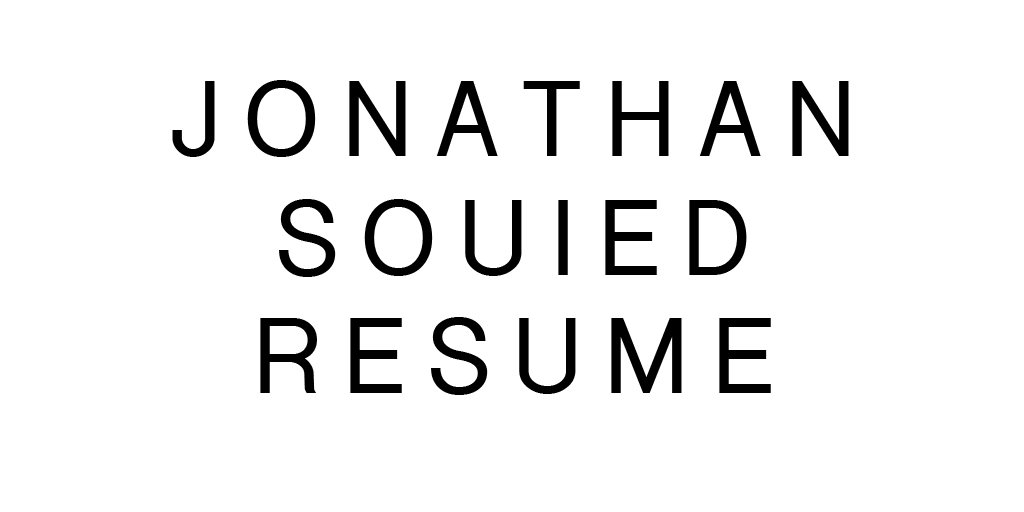
<style>
.page{position:relative;width:1024px;height:512px;background:#ffffff}
.page>*{position:absolute;margin:0}
.t1{font:99px "ShreeDev0714-Bold";letter-spacing:0.25em;color:#000000}
</style>
<div class="page">
<p class="t1" style="left:172px;top:80px;width:677px;height:315px;text-align:center">JONATHAN<br>SOUIED<br>RESUME</p>
</div>
